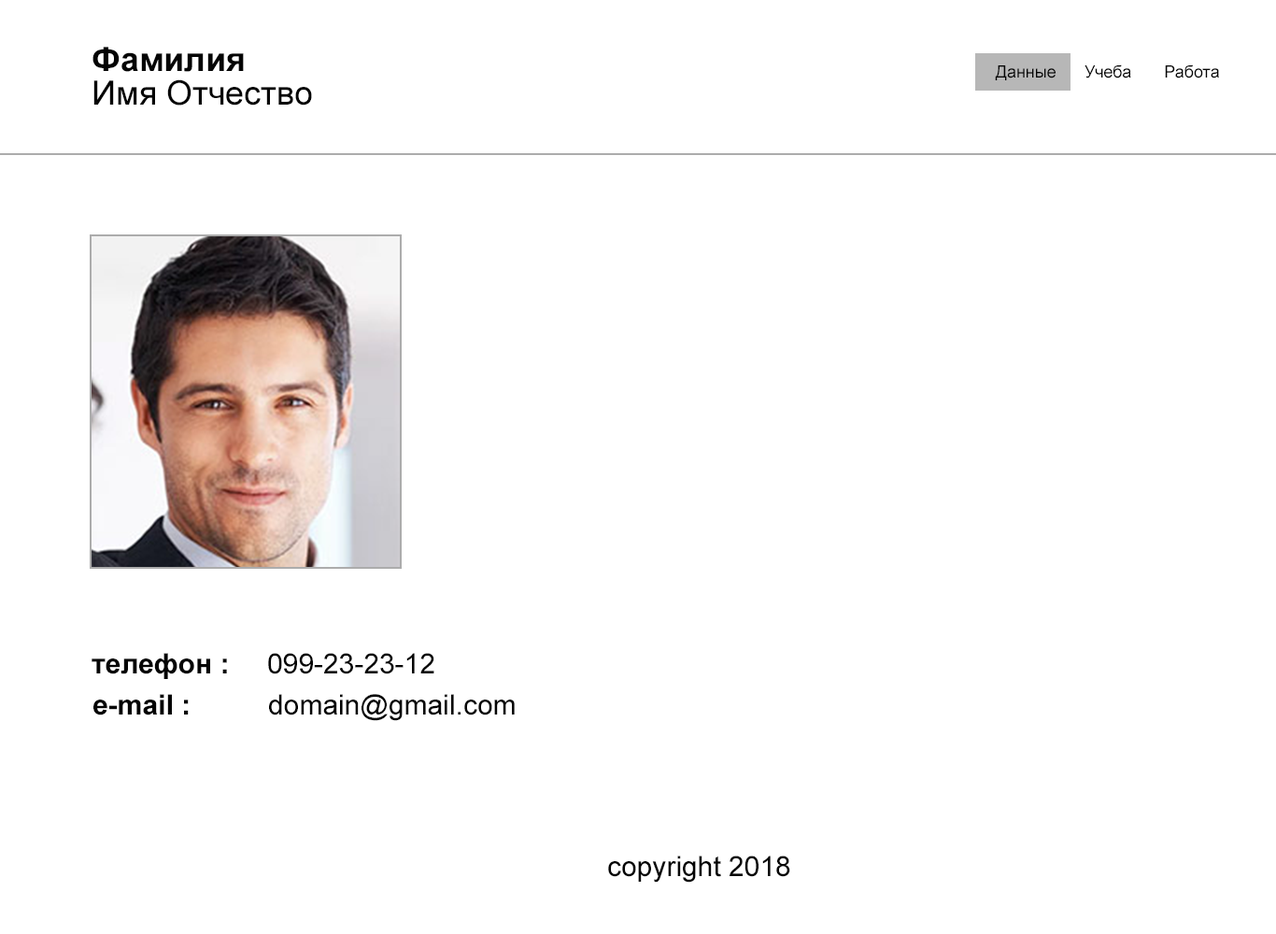
<style>
.page{position:relative;width:1276px;height:934px;background:#ffffff}
.page>*{position:absolute;margin:0}
.t1{font:33.6px/33.6px "ArialMT";color:#040404}
.t2{font:33.6px/33.6px "Arial-BoldMT";color:#040404}
.t3{font:16.8px "ArialMT";color:#040404}
.t4{font:28px "Arial-BoldMT";color:#040404}
.t5{font:28px "ArialMT";color:#040404}
</style>
<div class="page">
<p class="t1" style="left:92px;top:47px;width:220px;height:59px"><span class="t2">Фамилия<br></span>Имя Отчество</p>
<p class="t3" style="left:995px;top:64px;width:224px;height:16px">Данные      Учеба       Работа</p>
<p class="t4" style="left:92px;top:653px;width:135px;height:26px">телефон :</p>
<p class="t5" style="left:268px;top:653px;width:166px;height:22px">099-23-23-12</p>
<p class="t4" style="left:93px;top:694px;width:96px;height:22px">e-mail :</p>
<p class="t5" style="left:269px;top:694px;width:246px;height:27px">domain@gmail.com</p>
<p class="t5" style="left:608px;top:856px;width:182px;height:27px">copyright 2018</p>
</div>
